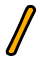
<style>
.page{position:relative;width:40px;height:60px;background:#ffffff}
.page>*{position:absolute;margin:0}
.t1{font:60px "Herculanum";color:#ffae00;font-weight:bold}
</style>
<div class="page">
<p class="t1" style="left:8px;top:8px;width:26px;height:45px">/</p>
</div>
